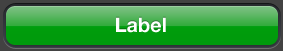
<style>
.page{position:relative;width:283px;height:51px}
.page>*{position:absolute;margin:0}
.t1{font:20px "HelveticaNeue-Bold";color:#ffffff}
</style>
<div class="page">
<p class="t1" style="left:116px;top:17px;width:50px;height:16px">Label</p>
</div>
